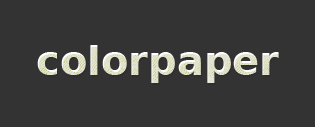
<style>
.page{position:relative;width:315px;height:127px;background:#333333}
.page>*{position:absolute;margin:0}
.t1{font:40px "DejaVuSans-Bold"}
</style>
<div class="page">
<p class="t1" style="left:37px;top:45px;width:242px;height:38px">colorpaper</p>
</div>
